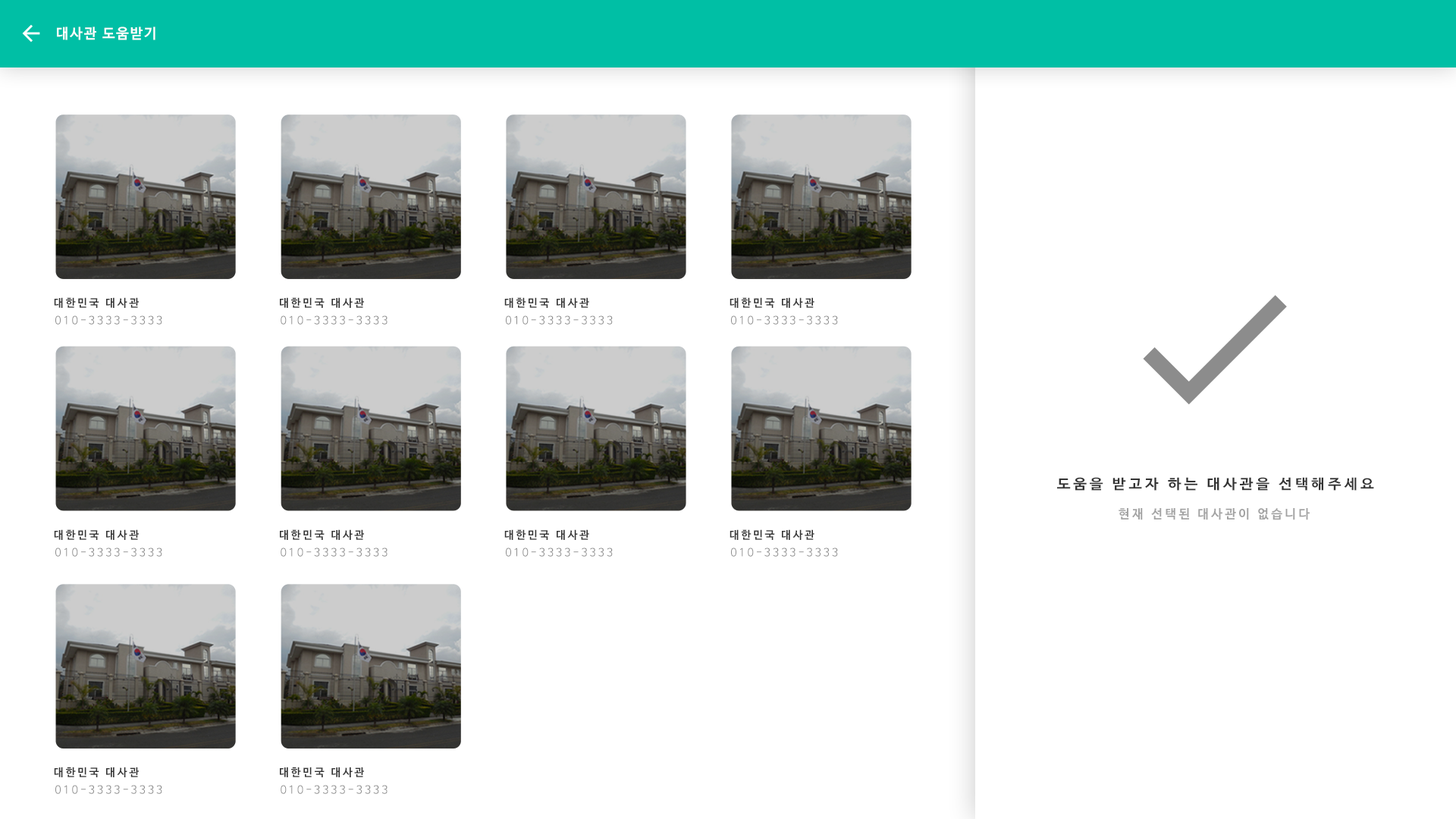
<style>
.page{position:relative;width:1456px;height:819px;background:#ffffff}
.page>*{position:absolute;margin:0}
.t1{font:14px "NanumBarunGothicBold";letter-spacing:0.1em;color:#ffffff}
.t2{font:10.8px "NanumBarunGothicBold";letter-spacing:0.2em;color:#343434}
.t3{font:10.8px "NanumBarunGothic";letter-spacing:0.2em;color:#8d8d8d}
.t4{font:13.8px "NanumBarunGothicBold";letter-spacing:0.2em;color:#343434;scale:1.09 1}
.t5{font:12.5px "NanumBarunGothicBold";letter-spacing:0.2em;color:#a3a3a3}
</style>
<div class="page">
<p class="t1" style="left:57px;top:27px;width:98px;height:13px">대사관 도움받기</p>
<p class="t2" style="left:54px;top:297px;width:85px;height:11px">대한민국 대사관</p>
<p class="t2" style="left:280px;top:297px;width:84px;height:11px">대한민국 대사관</p>
<p class="t2" style="left:504px;top:297px;width:85px;height:11px">대한민국 대사관</p>
<p class="t2" style="left:730px;top:297px;width:84px;height:11px">대한민국 대사관</p>
<p class="t3" style="left:55px;top:315px;width:107px;height:10px">010-3333-3333</p>
<p class="t3" style="left:281px;top:315px;width:107px;height:10px">010-3333-3333</p>
<p class="t3" style="left:506px;top:315px;width:107px;height:10px">010-3333-3333</p>
<p class="t3" style="left:731px;top:315px;width:107px;height:10px">010-3333-3333</p>
<p class="t4" style="left:1057px;top:477px;width:317px;height:14px">도움을 받고자 하는 대사관을 선택해주세요</p>
<p class="t5" style="left:1119px;top:508px;width:191px;height:12px">현재 선택된 대사관이 없습니다</p>
<p class="t2" style="left:54px;top:529px;width:85px;height:11px">대한민국 대사관</p>
<p class="t2" style="left:280px;top:529px;width:84px;height:11px">대한민국 대사관</p>
<p class="t2" style="left:504px;top:529px;width:85px;height:11px">대한민국 대사관</p>
<p class="t2" style="left:730px;top:529px;width:84px;height:11px">대한민국 대사관</p>
<p class="t3" style="left:55px;top:548px;width:107px;height:9px">010-3333-3333</p>
<p class="t3" style="left:281px;top:548px;width:107px;height:9px">010-3333-3333</p>
<p class="t3" style="left:506px;top:548px;width:107px;height:9px">010-3333-3333</p>
<p class="t3" style="left:731px;top:548px;width:107px;height:9px">010-3333-3333</p>
<p class="t2" style="left:54px;top:767px;width:85px;height:10px">대한민국 대사관</p>
<p class="t2" style="left:280px;top:767px;width:84px;height:10px">대한민국 대사관</p>
<p class="t3" style="left:55px;top:785px;width:107px;height:9px">010-3333-3333</p>
<p class="t3" style="left:281px;top:785px;width:107px;height:9px">010-3333-3333</p>
</div>
